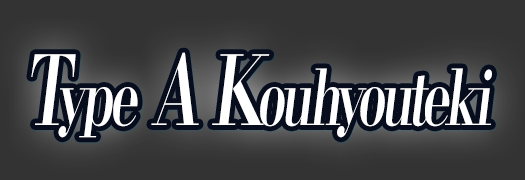
<style>
.page{position:relative;width:525px;height:180px;background:#333333}
.page>*{position:absolute;margin:0}
.t1{font:76.8px "KochoStd-Heavy";letter-spacing:-0.08em;color:#ffffff;font-style:italic;scale:0.68 1}
.t2{font:96px "KochoStd-Heavy";letter-spacing:-0.08em;color:#ffffff;font-style:italic;scale:0.68 1}
</style>
<div class="page">
<p class="t1" style="left:31px;top:52px;width:461px;height:86px"><span class="t2">T</span>ype<span class="t2"> A K</span>ouhyouteki</p>
</div>
